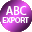
<style>
.page{position:relative;width:32px;height:32px;background:#ffffff}
.page>*{position:absolute;margin:0}
.t1{font:12px "MyriadPro-Regular";color:#ffffff}
.t2{font:8px "MyriadPro-Regular";color:#ffffff}
</style>
<div class="page">
<p class="t1" style="left:6px;top:6px;width:21px;height:9px">ABC</p>
<p class="t2" style="left:2px;top:17px;width:27px;height:6px">EXPORT</p>
</div>
